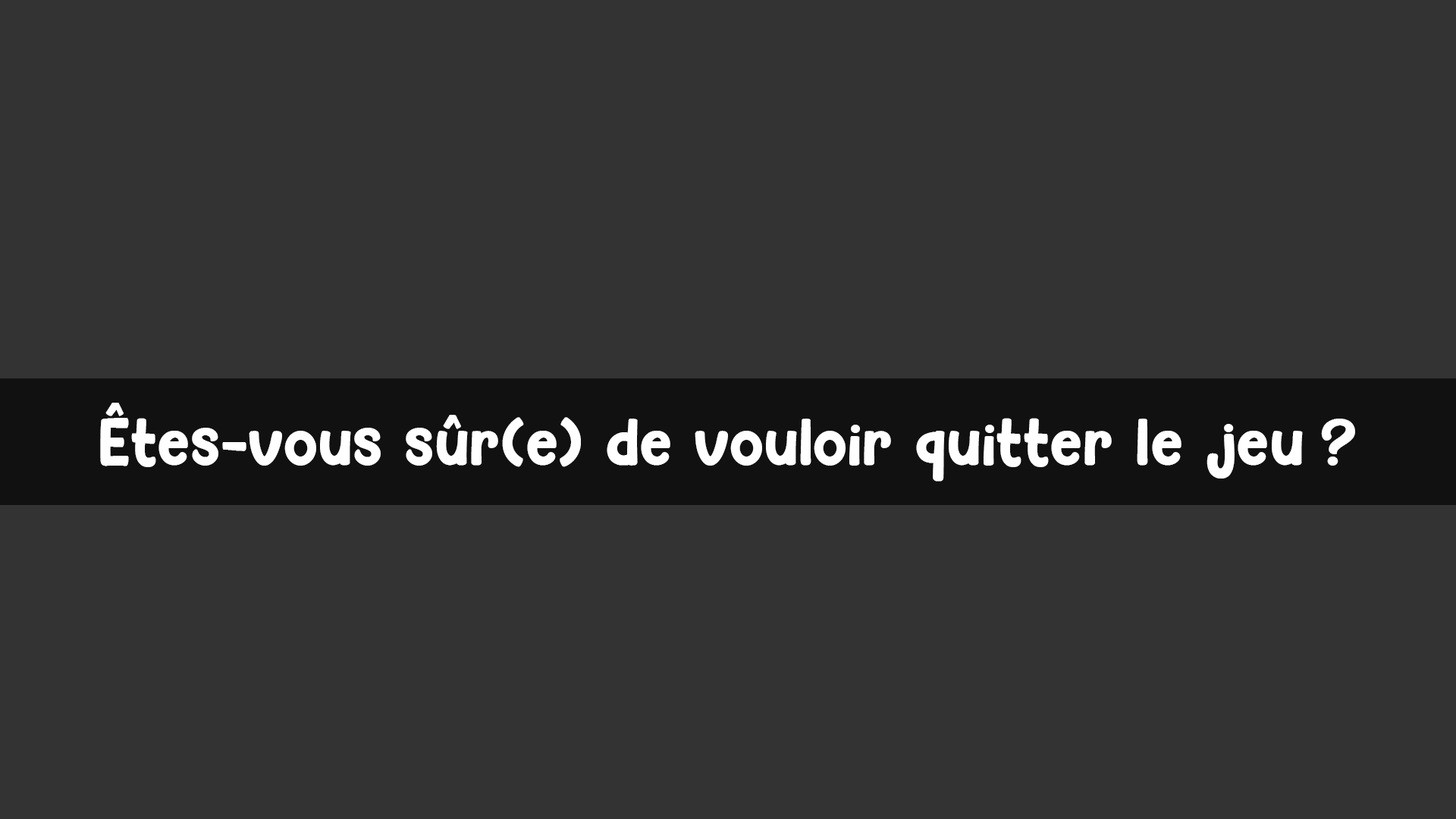
<style>
.page{position:relative;width:1456px;height:819px;background:#333333}
.page>*{position:absolute;margin:0}
.t1{font:62.2px "Hey-Comic";color:#ffffff}
</style>
<div class="page">
<p class="t1" style="left:100px;top:403px;width:1203px;height:79px">Êtes-vous sûr(e) de vouloir quitter le jeu</p>
<p class="t1" style="left:1321px;top:419px;width:34px;height:47px">?</p>
</div>
